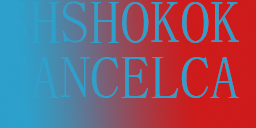
<style>
.page{position:relative;width:256px;height:128px}
.page>*{position:absolute;margin:0}
.t1{font:60px "SimSun";color:#2da0cb}
</style>
<div class="page">
<p class="t1" style="left:2px;top:1px;width:237px;height:42px">SHSHOKOK</p>
<p class="t1" style="left:1px;top:57px;width:238px;height:41px">CANCELCAL</p>
</div>
